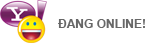
<style>
.page{position:relative;width:145px;height:43px;background:#ffffff}
.page>*{position:absolute;margin:0}
.t1{font:12px "Arial-BoldMT";color:#676767;text-transform:uppercase}
</style>
<div class="page">
<p class="t1" style="left:58px;top:19px;width:87px;height:9px">Đang online!</p>
</div>
